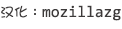
<style>
.page{position:relative;width:122px;height:29px;background:#ffffff}
.page>*{position:absolute;margin:0}
.t1{font:16px "YaHei-Consolas-Hybrid";color:#3d3a3a}
.t2{font:14px "DFGirl";color:#3d3a3a}
</style>
<div class="page">
<p class="t1" style="left:1px;top:5px;width:120px;height:16px"><span class="t2">汉化：</span>mozillazg</p>
</div>
